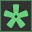
<style>
.page{position:relative;width:32px;height:32px;background:#333333}
.page>*{position:absolute;margin:0}
.t1{font:61.3px "LucidaSansUnicode";letter-spacing:0.02em;color:#6bce80;font-weight:bold}
</style>
<div class="page">
<p class="t1" style="left:3px;top:4px;width:26px;height:24px">*</p>
</div>
